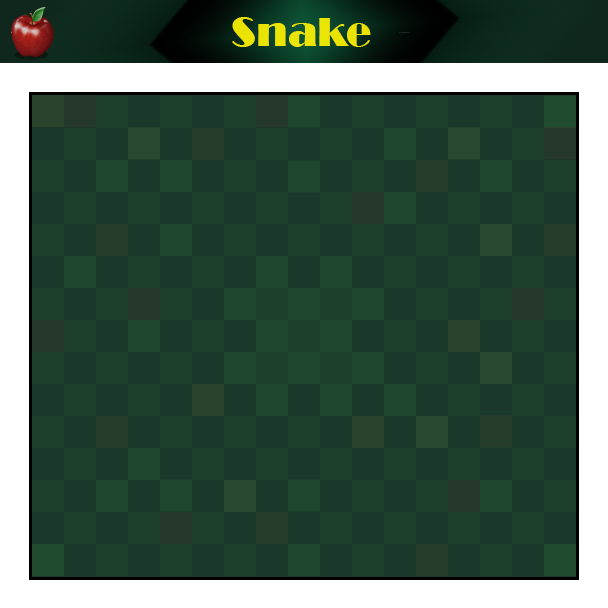
<style>
.page{position:relative;width:608px;height:608px;background:#1a392b}
.page>*{position:absolute;margin:0}
.t1{font:41.7px "Broadway";color:#fff600}
</style>
<div class="page">
<p class="t1" style="left:232px;top:17px;width:139px;height:30px">Snake</p>
</div>
